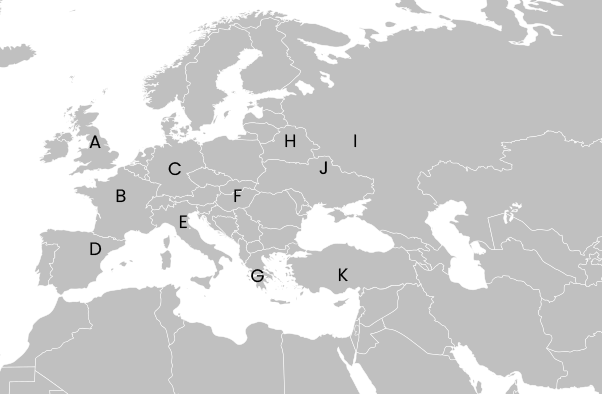
<style>
.page{position:relative;width:602px;height:394px;background:#c0c0c0}
.page>*{position:absolute;margin:0}
.t1{font:18px/26.8px "Poppins-Regular";letter-spacing:0.22em;color:#000000}
</style>
<div class="page">
<p class="t1" style="left:89px;top:135px;width:175px;height:148px">A<br>         C<br>   B   F<br>      E    <br>D          <br>      G</p>
<p class="t1" style="left:285px;top:134px;width:72px;height:148px">H      I<br>    J<br><br><br> <br>   K</p>
</div>
